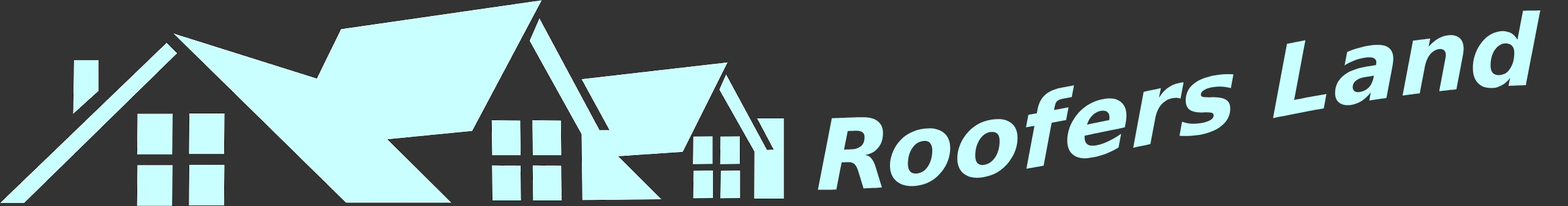
<style>
.page{position:relative;width:1568px;height:206px;background:#333333}
.page>*{position:absolute;margin:0}
.t1{font:98px "DejaVuSans-BoldOblique";color:#c9ffff}
</style>
<div class="page">
<p class="t1" style="left:818px;top:10px;width:722px;height:180px">Roofers Land</p>
</div>
